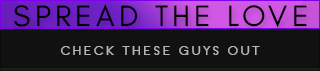
<style>
.page{position:relative;width:320px;height:71px;background:#111111}
.page>*{position:absolute;margin:0}
.t1{font:30px "GlacialIndifference-Regular";letter-spacing:0.14em;color:#000000}
.t2{font:14px "SFOldRepublic";letter-spacing:0.14em;color:#b6b6b6}
</style>
<div class="page">
<p class="t1" style="left:14px;top:4px;width:293px;height:24px">SPREAD THE LOVE</p>
<p class="t2" style="left:60px;top:46px;width:200px;height:9px">CHECK THESE GUYS OUT</p>
</div>
